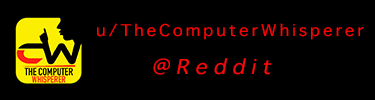
<style>
.page{position:relative;width:375px;height:100px;background:#000000}
.page>*{position:absolute;margin:0}
.t1{font:22px "AppleSymbols";letter-spacing:0.12em;color:#f70606;scale:1.07 1}
.t2{font:28px "AppleSymbols";letter-spacing:0.2em;color:#f70a0a;font-style:italic;scale:1.07 1}
</style>
<div class="page">
<p class="t1" style="left:97px;top:23px;width:267px;height:17px">u/TheComputerWhisperer</p>
<p class="t2" style="left:153px;top:58px;width:119px;height:17px">@Reddit</p>
</div>
